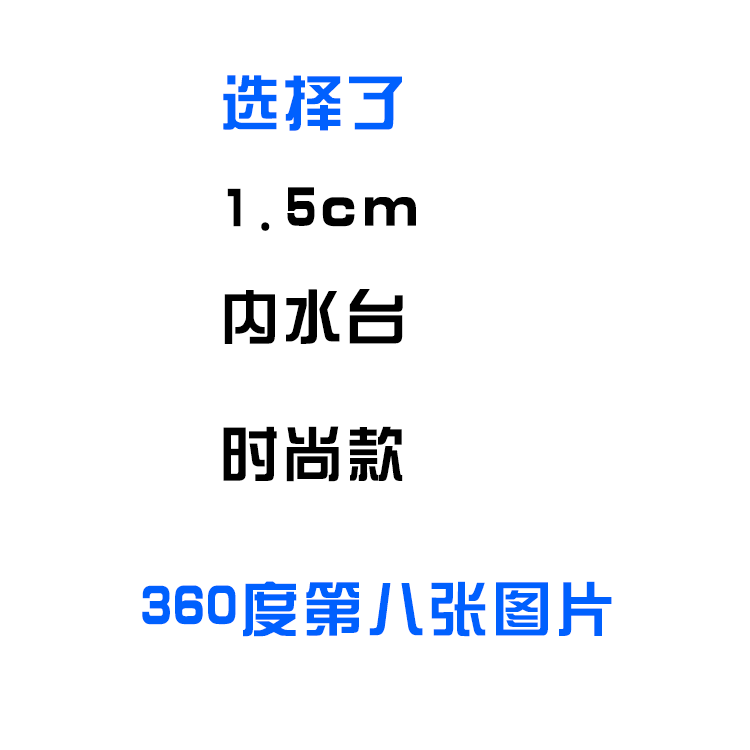
<style>
.page{position:relative;width:750px;height:750px;background:#ffffff}
.page>*{position:absolute;margin:0}
.t1{font:60px "ç»å¸ç»¼èºä½ç®-regular";letter-spacing:0.05em;color:#0060fe}
.t2{font:60px "ç»å¸ç»¼èºä½ç®-regular";letter-spacing:0.05em;color:#000000}
</style>
<div class="page">
<p class="t1" style="left:223px;top:75px;width:179px;height:56px">选择了</p>
<p class="t2" style="left:227px;top:187px;width:189px;height:44px">1.5cm</p>
<p class="t2" style="left:224px;top:289px;width:179px;height:55px">内水台</p>
<p class="t2" style="left:223px;top:426px;width:180px;height:56px">时尚款</p>
<p class="t1" style="left:142px;top:581px;width:470px;height:56px">360度第八张图片</p>
</div>
